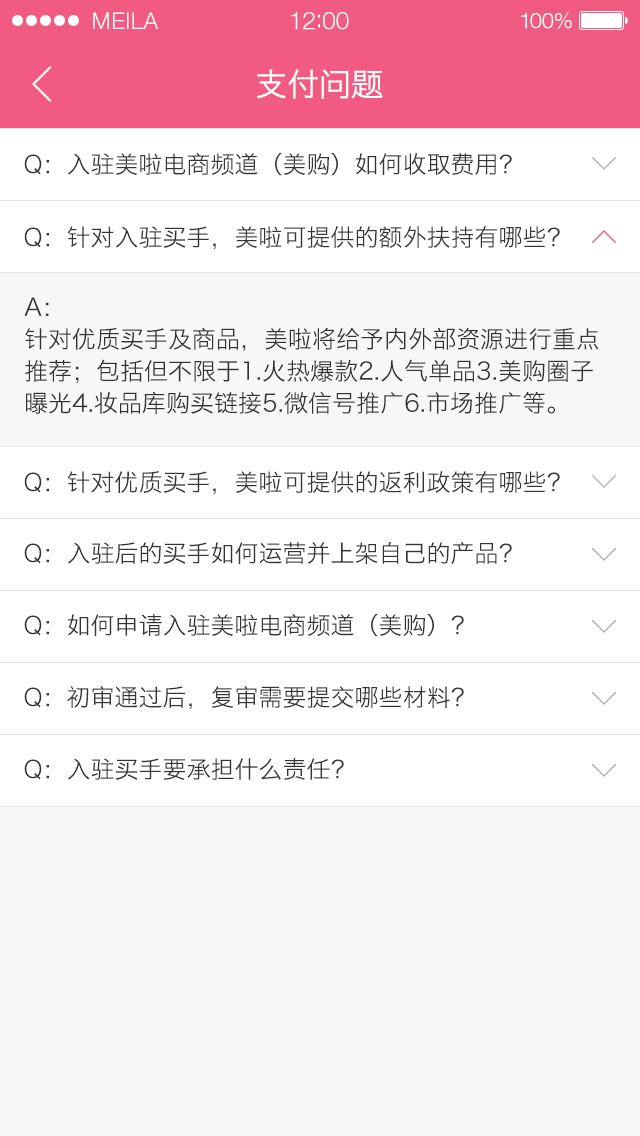
<style>
.page{position:relative;width:640px;height:1136px;background:#f7f7f7}
.page>*{position:absolute;margin:0}
.t1{font:23px "HelveticaNeueLT-Light";letter-spacing:0.02em;color:#ffffff}
.t2{font:25px "HelveticaNeueLT-Light";letter-spacing:-0.02em;color:#ffffff}
.t3{font:22px "HelveticaNeueLT-Light";letter-spacing:-0.02em;color:#ffffff}
.t4{font:32px "HiraginoSansGB-W3";color:#ffffff}
.t5{font:24px "HiraginoSansGB-W3";color:#343434}
.t6{font:24px/32px "HiraginoSansGB-W3";color:#323232}
</style>
<div class="page">
<p class="t1" style="left:93px;top:12px;width:66px;height:17px">MEILA</p>
<p class="t2" style="left:291px;top:12px;width:58px;height:18px">12:00</p>
<p class="t3" style="left:521px;top:12px;width:51px;height:17px">100%</p>
<p class="t4" style="left:257px;top:69px;width:126px;height:30px">支付问题</p>
<p class="t5" style="left:24px;top:153px;width:488px;height:23px">Q：入驻美啦电商频道（美购）如何收取费用？</p>
<p class="t5" style="left:24px;top:226px;width:536px;height:23px">Q：针对入驻买手，美啦可提供的额外扶持有哪些？</p>
<p class="t6" style="left:24px;top:297px;width:575px;height:117px">A：<br>针对优质买手及商品，美啦将给予内外部资源进行重点推荐；包括但不限于1.火热爆款2.人气单品3.美购圈子曝光4.妆品库购买链接5.微信号推广6.市场推广等。</p>
<p class="t5" style="left:24px;top:471px;width:536px;height:23px">Q：针对优质买手，美啦可提供的返利政策有哪些？</p>
<p class="t5" style="left:24px;top:541px;width:488px;height:24px">Q：入驻后的买手如何运营并上架自己的产品？</p>
<p class="t5" style="left:24px;top:614px;width:440px;height:23px">Q：如何申请入驻美啦电商频道（美购）？</p>
<p class="t5" style="left:24px;top:686px;width:440px;height:23px">Q：初审通过后，复审需要提交哪些材料？</p>
<p class="t5" style="left:24px;top:758px;width:320px;height:23px">Q：入驻买手要承担什么责任？</p>
</div>
